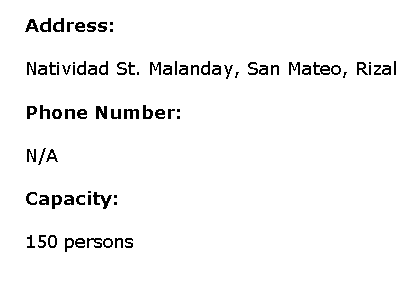
<style>
.page{position:relative;width:418px;height:285px;background:#ffffff}
.page>*{position:absolute;margin:0}
.t1{font:18px "Verdana";color:#010101}
.t2{font:18px "Verdana-Bold";color:#010101}
</style>
<div class="page">
<p class="t1" style="left:25px;top:18px;width:371px;height:234px"><span class="t2">Address: <br></span><br>Natividad St. Malanday, San Mateo, Rizal<br><br><span class="t2">Phone Number:<br></span><br>N/A<br><br><span class="t2">Capacity: <br><br></span>150 persons</p>
</div>
